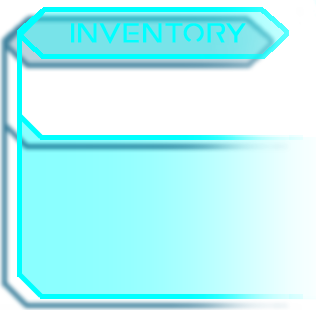
<style>
.page{position:relative;width:316px;height:310px;background:#ffffff}
.page>*{position:absolute;margin:0}
.t1{font:30px "EarthOrbiter";color:#00ffff;font-weight:bold}
</style>
<div class="page">
<p class="t1" style="left:71px;top:23px;width:175px;height:21px">inventory</p>
</div>
